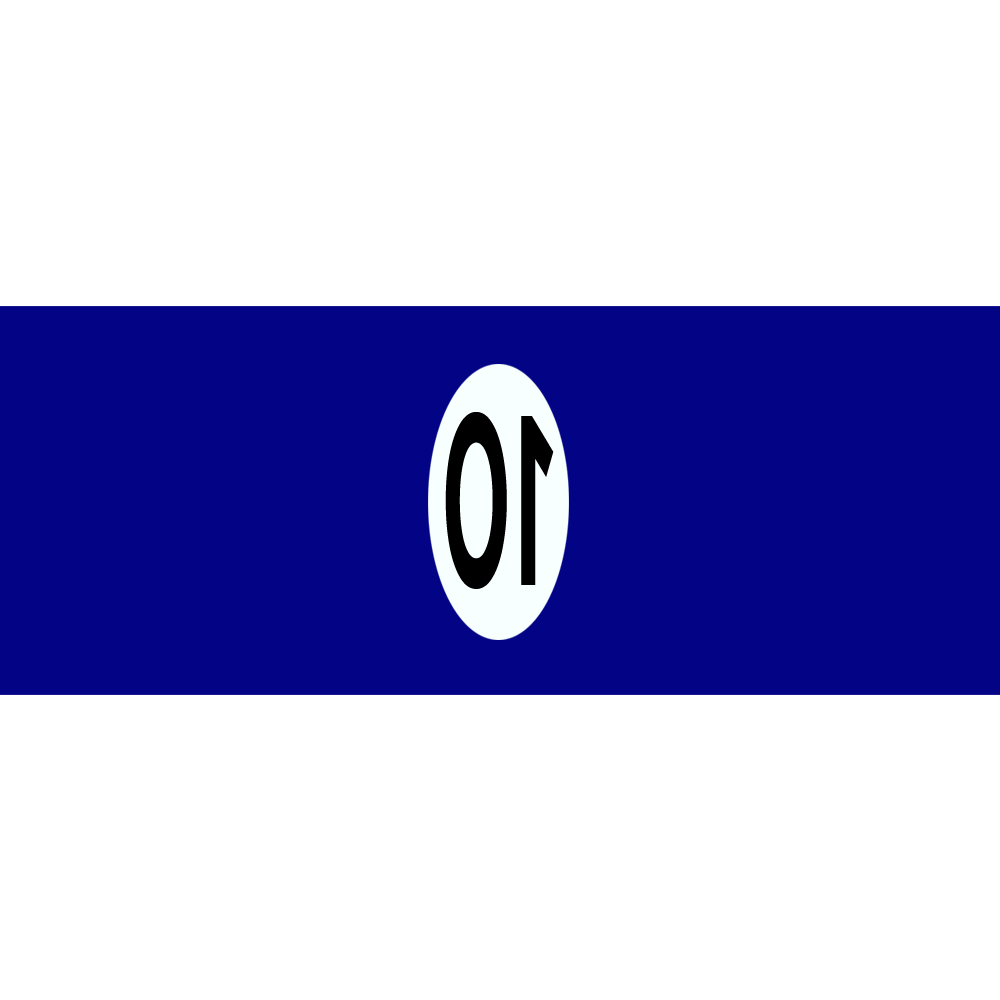
<style>
.page{position:relative;width:1000px;height:1000px;background:#ffffff}
.page>*{position:absolute;margin:0}
.t1{font:246.9px "GoogleSans-Bold";color:#000000;scale:0.43 1}
</style>
<div class="page">
<p class="t1" style="left:445px;top:412px;width:109px;height:177px;rotate:180deg">10</p>
</div>
